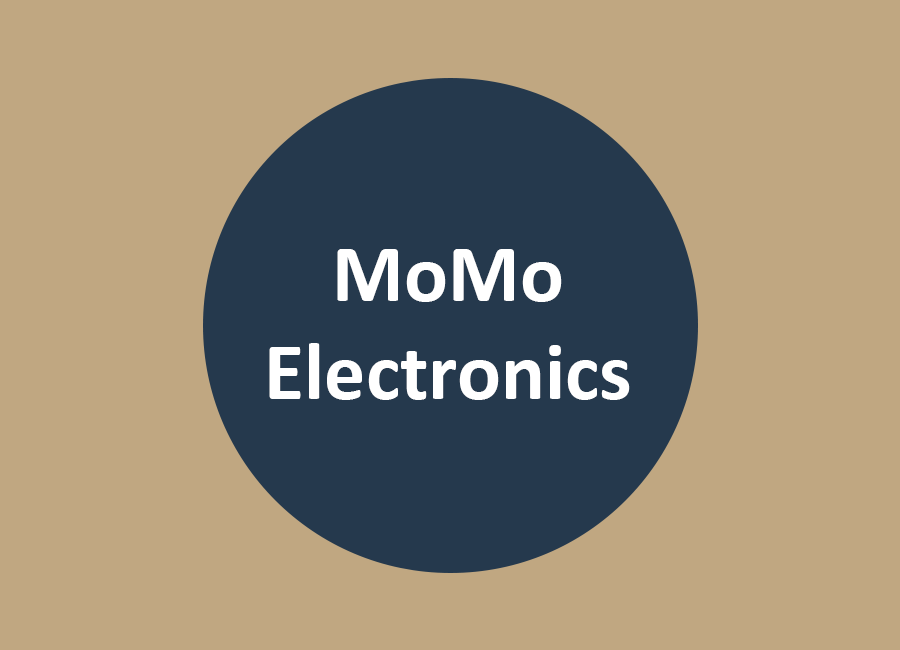
<style>
.page{position:relative;width:900px;height:650px;background:#c0a781}
.page>*{position:absolute;margin:0}
.t1{font:82px "Calibri-Bold";color:#ffffff}
</style>
<div class="page">
<p class="t1" style="left:269px;top:249px;width:361px;height:151px;text-align:center">MoMo<br>Electronics</p>
</div>
